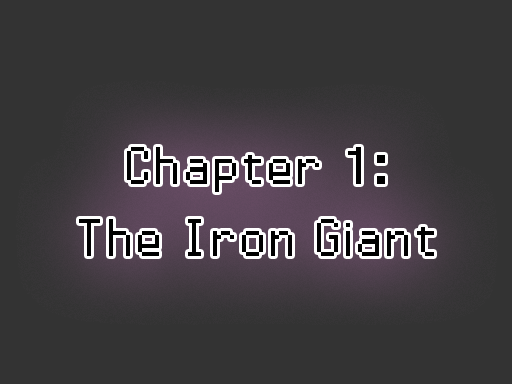
<style>
.page{position:relative;width:512px;height:384px;background:#333333}
.page>*{position:absolute;margin:0}
.t1{font:54px/72px "PowerClear-Regular";letter-spacing:0.08em;color:#000000}
</style>
<div class="page">
<p class="t1" style="left:79px;top:147px;width:355px;height:109px;text-align:center">Chapter 1:<br>The Iron Giant</p>
</div>
